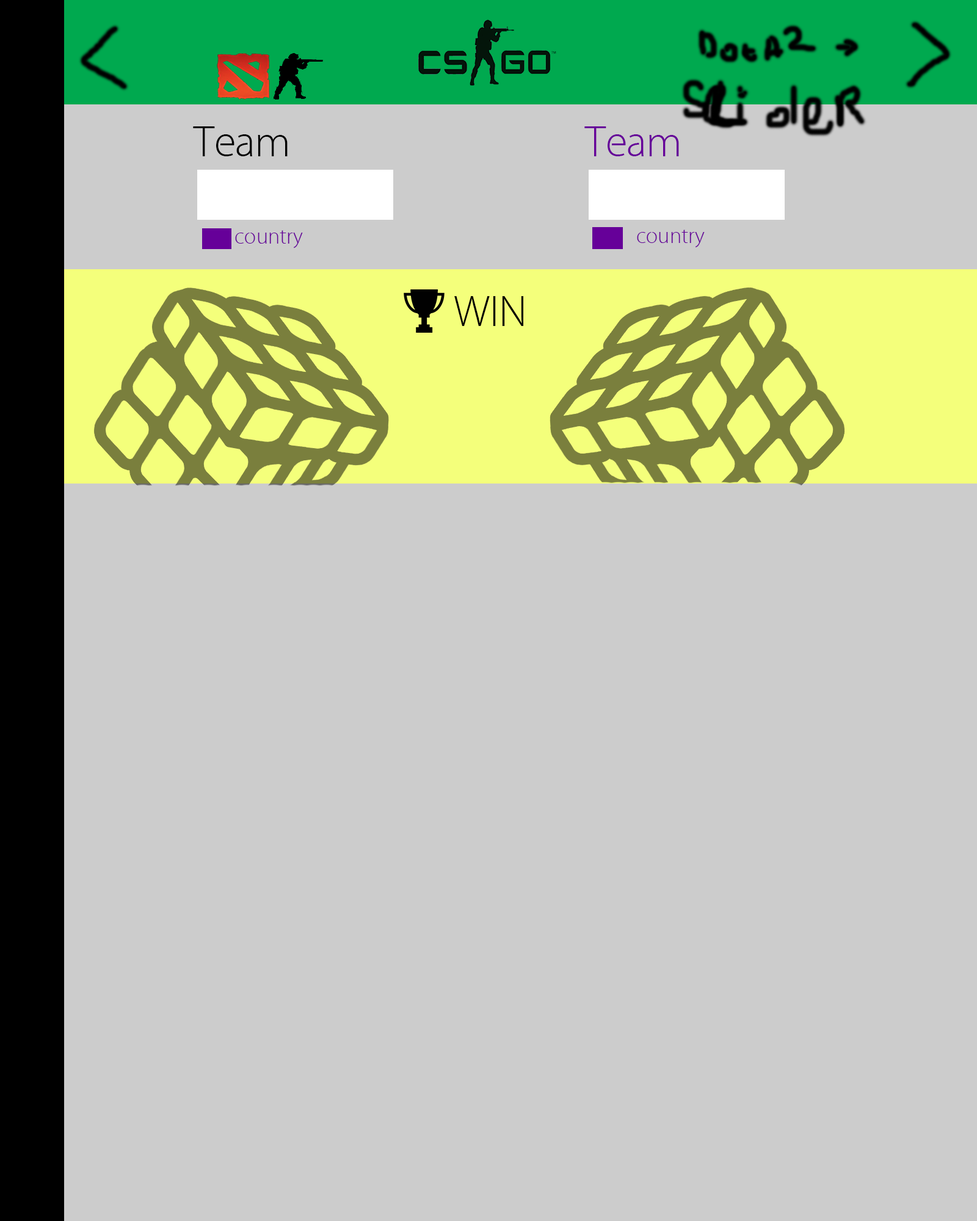
<style>
.page{position:relative;width:977px;height:1221px;background:#cccccc}
.page>*{position:absolute;margin:0}
.t1{font:44px "Cleanvertising-Light";color:#000000}
.t2{font:44px "Cleanvertising-Light";color:#660099}
.t3{font:22px "Cleanvertising-Light";color:#660099}
</style>
<div class="page">
<p class="t1" style="left:193px;top:126px;width:95px;height:30px">Team</p>
<p class="t2" style="left:584px;top:126px;width:95px;height:30px">Team</p>
<p class="t3" style="left:235px;top:230px;width:68px;height:18px">country</p>
<p class="t3" style="left:637px;top:230px;width:67px;height:18px">country</p>
<p class="t1" style="left:454px;top:296px;width:69px;height:30px">WIN</p>
</div>
